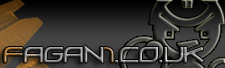
<style>
.page{position:relative;width:225px;height:68px}
.page>*{position:absolute;margin:0}
.t1{font:20px "ZeroHour";font-weight:bold}
</style>
<div class="page">
<p class="t1" style="left:3px;top:45px;width:201px;height:19px">fagan1.co.uk</p>
</div>
